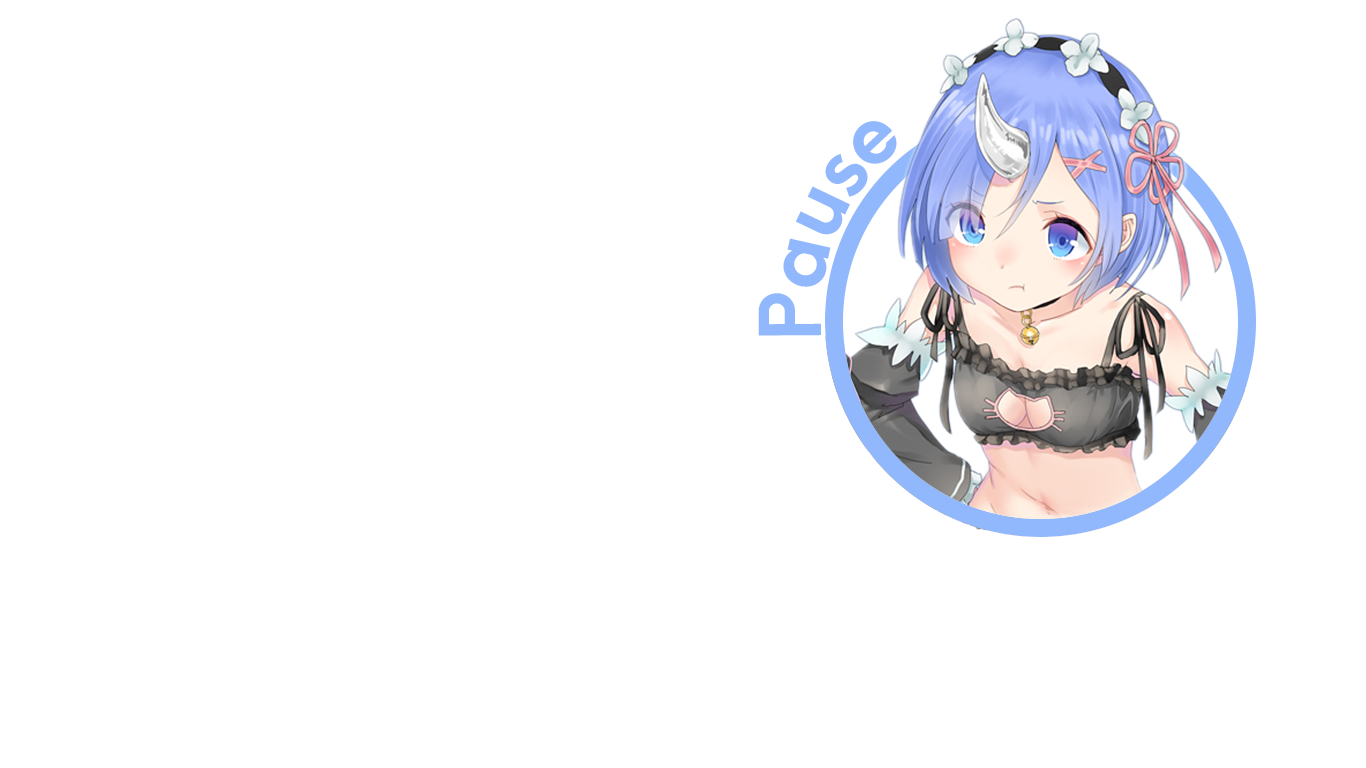
<style>
.page{position:relative;width:1366px;height:768px;background:#ffffff}
.page>*{position:absolute;margin:0}
.t1{font:82.8px "HKExplorerSharp-SemiBold";letter-spacing:-0.035em;color:#91b8fc}
</style>
<div class="page">
<p class="t1" style="left:758px;top:121px;width:139px;height:215px;rotate:108deg">Pause</p>
</div>
